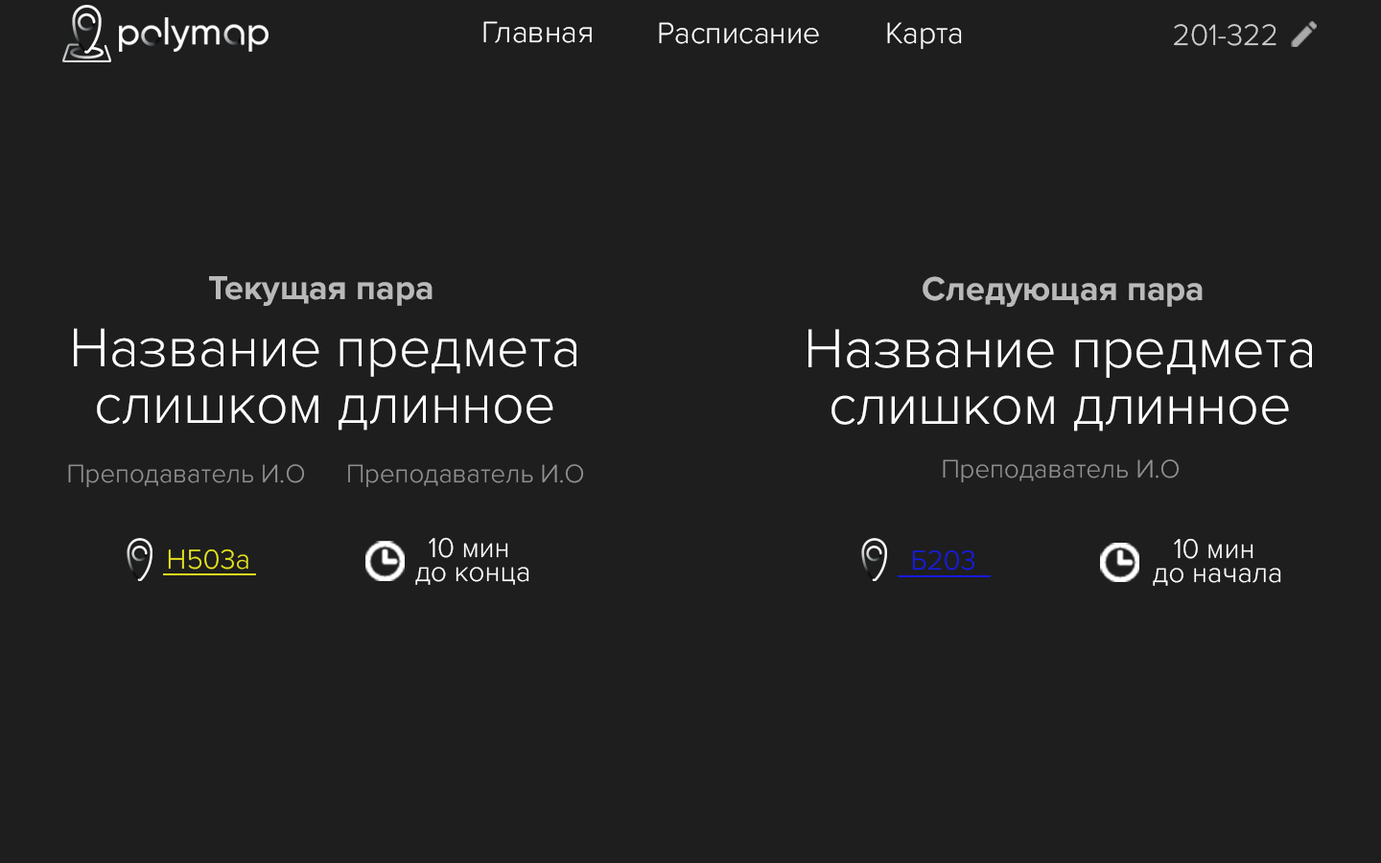
<style>
.page{position:relative;width:1381px;height:863px;background:#1e1e1e}
.page>*{position:absolute;margin:0}
.t1{font:30.7px "ProximaNova-Light";color:#ffffff}
.t2{font:30.7px "ProximaNova-Light";color:#cccccc}
.t3{font:34.5px "ProximaNova-Bold";color:#b9b9b9}
.t4{font:56.6px/56.6px "ProximaNova-Light";color:#ffffff}
.t5{font:56.7px/56.7px "ProximaNova-Light";color:#ffffff}
.t6{font:26.5px "ProximaNova-Light";color:#919191}
.t7{font:26.4px "ProximaNova-Light";color:#919191}
.t8{font:28.3px "ProximaNova-Light";color:#ffffff}
.t9{font:28.4px "ProximaNova-Light";color:#ffffff}
.t10{font:28.3px "ProximaNova-Light";color:#e7e51d}
.t11{font:28.4px "ProximaNova-Light";color:#161be1}
</style>
<div class="page">
<p class="t1" style="left:483px;top:21px;width:109px;height:22px">Главная</p>
<p class="t1" style="left:659px;top:22px;width:160px;height:22px">Расписание</p>
<p class="t1" style="left:887px;top:22px;width:75px;height:28px">Карта</p>
<p class="t2" style="left:1174px;top:24px;width:103px;height:22px">201-322</p>
<p class="t3" style="left:209px;top:276px;width:224px;height:30px">Текущая пара</p>
<p class="t3" style="left:923px;top:276px;width:280px;height:31px">Следующая пара</p>
<p class="t4" style="left:74px;top:328px;width:502px;height:103px;text-align:center">Название предмета<br>слишком длинное</p>
<p class="t5" style="left:809px;top:329px;width:503px;height:103px;text-align:center">Название предмета<br>слишком длинное</p>
<p class="t6" style="left:943px;top:459px;width:237px;height:24px">Преподаватель И.О</p>
<p class="t7" style="left:68px;top:464px;width:237px;height:24px">Преподаватель И.О</p>
<p class="t7" style="left:348px;top:464px;width:236px;height:23px">Преподаватель И.О</p>
<p class="t8" style="left:429px;top:537px;width:79px;height:21px">10 мин</p>
<p class="t9" style="left:1174px;top:538px;width:80px;height:21px">10 мин</p>
<p class="t10" style="left:168px;top:549px;width:80px;height:21px">Н503а</p>
<p class="t11" style="left:912px;top:550px;width:63px;height:21px">Б203</p>
<p class="t8" style="left:415px;top:567px;width:114px;height:18px">до конца</p>
<p class="t9" style="left:1153px;top:568px;width:129px;height:18px">до начала</p>
</div>
